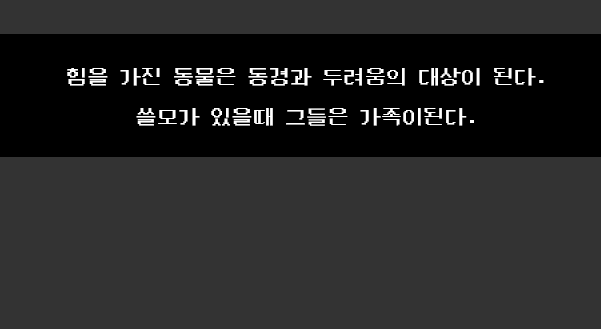
<style>
.page{position:relative;width:601px;height:329px;background:#333333}
.page>*{position:absolute;margin:0}
.t1{font:21.3px/20px "DungGeunMo";color:#ffffff}
</style>
<div class="page">
<p class="t1" style="left:67px;top:68px;width:477px;height:58px;text-align:center">힘을 가진 동물은 동경과 두려움의 대상이 된다.<br><br>쓸모가 있을때 그들은 가족이된다.</p>
</div>
